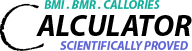
<style>
.page{position:relative;width:192px;height:51px;background:#ffffff}
.page>*{position:absolute;margin:0}
.t1{font:48px "Papyrus-Regular";color:#000000}
.t2{font:12px "MyriadPro-BoldIt";color:#14af9b}
.t3{font:30px "MyriadPro-BoldIt";color:#000000}
.t4{font:12px "MyriadPro-BoldIt";color:#5f65d3}
</style>
<div class="page">
<p class="t1" style="left:0px;top:3px;width:44px;height:48px">C</p>
<p class="t2" style="left:44px;top:0px;width:116px;height:9px">BMI . BMR . CALLORIES</p>
<p class="t3" style="left:36px;top:15px;width:156px;height:21px">ALCULATOR</p>
<p class="t4" style="left:60px;top:41px;width:128px;height:9px">SCIENTIFICALLY PROVED</p>
</div>
